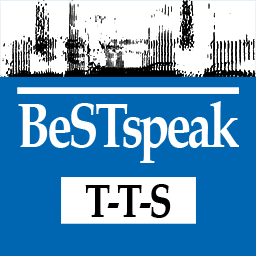
<style>
.page{position:relative;width:256px;height:256px;background:#0066b1}
.page>*{position:absolute;margin:0}
.t1{font:62.5px "PalatinoLinotype-Bold";letter-spacing:-0.075em;color:#ffffff;scale:0.8 1}
.t2{font:46.9px "PalatinoLinotype-Bold";letter-spacing:-0.075em;color:#000000;scale:0.8 1}
</style>
<div class="page">
<p class="t1" style="left:18px;top:101px;width:221px;height:62px">BeSTspeak</p>
<p class="t2" style="left:85px;top:184px;width:86px;height:34px">T-T-S</p>
</div>
